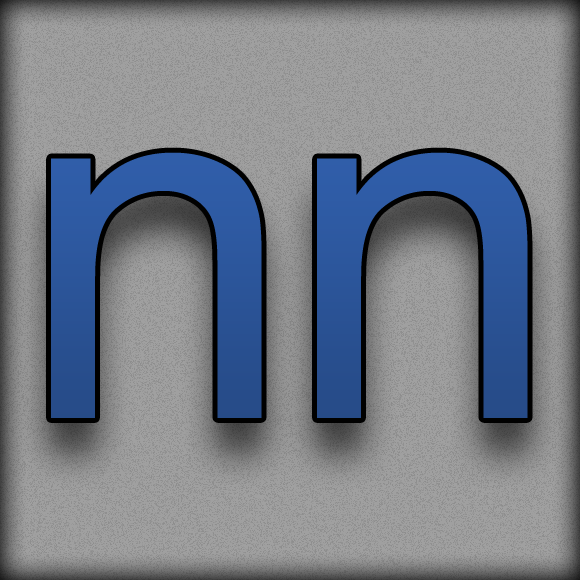
<style>
.page{position:relative;width:580px;height:580px}
.page>*{position:absolute;margin:0}
.t1{font:500px "ArialMT";letter-spacing:-0.025em;color:#305eaa}
</style>
<div class="page">
<p class="t1" style="left:51px;top:152px;width:477px;height:266px">nn</p>
</div>
